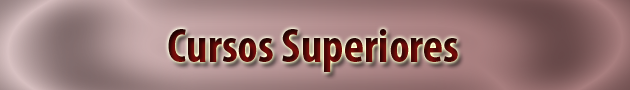
<style>
.page{position:relative;width:630px;height:90px}
.page>*{position:absolute;margin:0}
.t1{font:48px "MyriadPro-BoldCond"}
</style>
<div class="page">
<p class="t1" style="left:168px;top:29px;width:290px;height:43px">Cursos Superiores</p>
</div>
